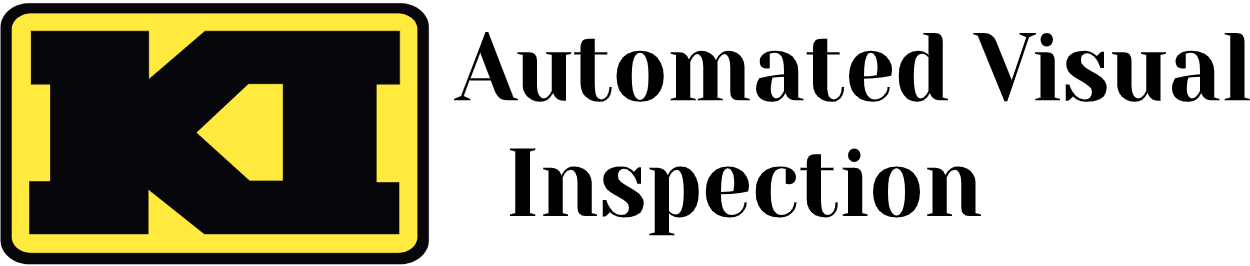
<style>
.page{position:relative;width:1250px;height:266px;background:#ffffff}
.page>*{position:absolute;margin:0}
.t1{font:96.4px "YesevaOne-Regular";color:#000000;scale:0.92 1}
</style>
<div class="page">
<p class="t1" style="left:454px;top:32px;width:796px;height:204px">Automated Visual <br>  Inspection</p>
</div>
